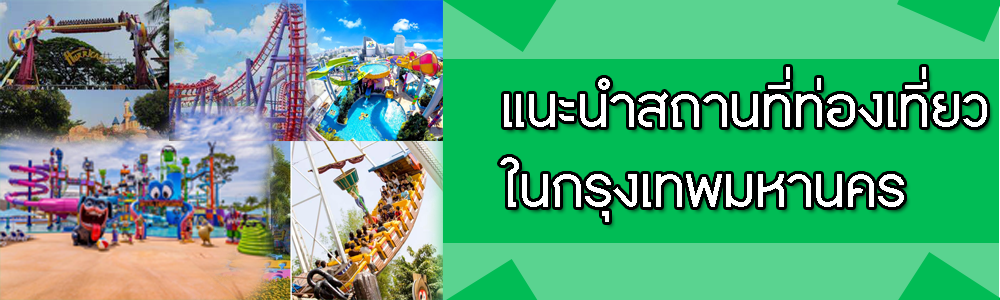
<style>
.page{position:relative;width:1000px;height:300px;background:#01bc55}
.page>*{position:absolute;margin:0}
.t1{font:66.7px "PK-Maehongson-Medium";color:#ffffff}
</style>
<div class="page">
<p class="t1" style="left:500px;top:67px;width:487px;height:155px">แนะนำสถานที่ท่องเที่ยว<br>ในกรุงเทพมหานคร</p>
</div>
